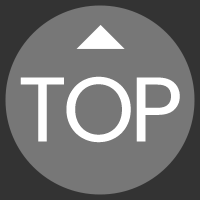
<style>
.page{position:relative;width:200px;height:200px;background:#777777}
.page>*{position:absolute;margin:0}
.t1{font:91.5px "Poppins-Regular";letter-spacing:-0.05em;color:#ffffff}
</style>
<div class="page">
<p class="t1" style="left:20px;top:76px;width:160px;height:67px">TOP</p>
</div>
